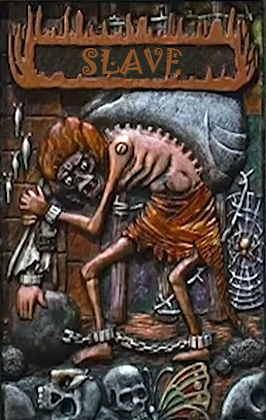
<style>
.page{position:relative;width:266px;height:420px}
.page>*{position:absolute;margin:0}
.t1{font:30px "Jokerman-Regular";color:#8d562d}
</style>
<div class="page">
<p class="t1" style="left:82px;top:48px;width:100px;height:28px">SLAVE</p>
</div>
